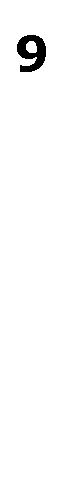
<style>
.page{position:relative;width:64px;height:500px;background:#ffffff}
.page>*{position:absolute;margin:0}
.t1{font:48px "Verdana-Bold";color:#000000}
</style>
<div class="page">
<p class="t1" style="left:17px;top:35px;width:29px;height:37px">9</p>
</div>
